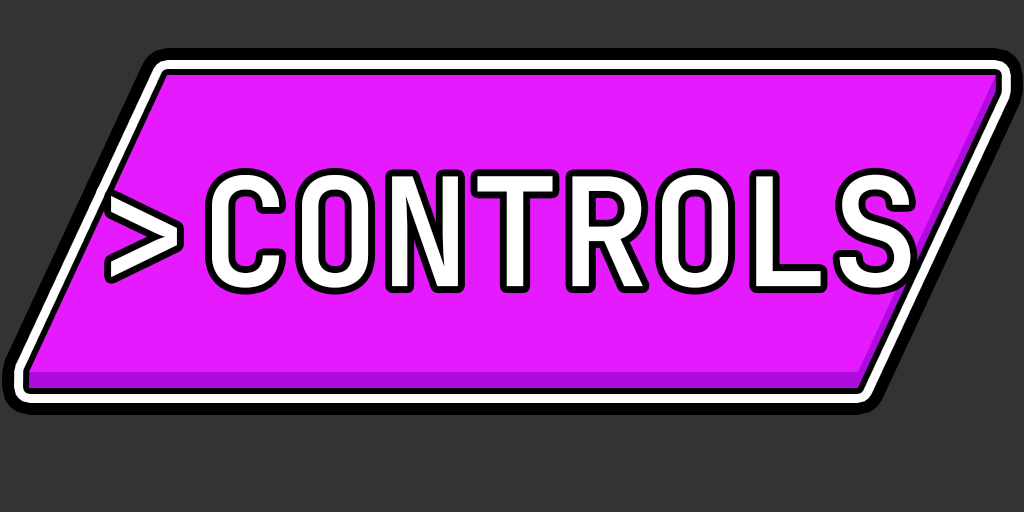
<style>
.page{position:relative;width:1024px;height:512px;background:#333333}
.page>*{position:absolute;margin:0}
.t1{font:150px "JetBrainsMonoRoman-Medium";color:#ffffff}
</style>
<div class="page">
<p class="t1" style="left:111px;top:174px;width:800px;height:114px">CONTROLS</p>
</div>
